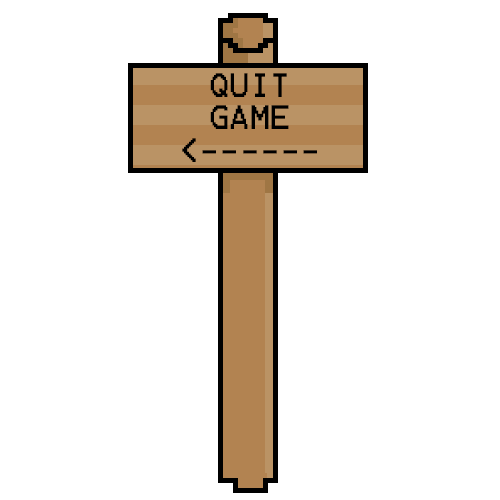
<style>
.page{position:relative;width:500px;height:500px;background:#ffffff}
.page>*{position:absolute;margin:0}
.t1{font:27px "Terminal";color:#000000}
</style>
<div class="page">
<p class="t1" style="left:182px;top:73px;width:135px;height:89px;text-align:center">QUIT <br>GAME<br>&lt;------</p>
</div>
